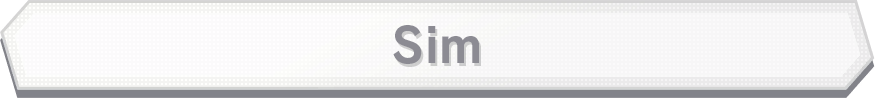
<style>
.page{position:relative;width:875px;height:98px;background:#fbfafb}
.page>*{position:absolute;margin:0}
.t1{font:48px "RodinPro-B";color:#8c8b93}
</style>
<div class="page">
<p class="t1" style="left:393px;top:25px;width:86px;height:39px">Sim</p>
</div>
